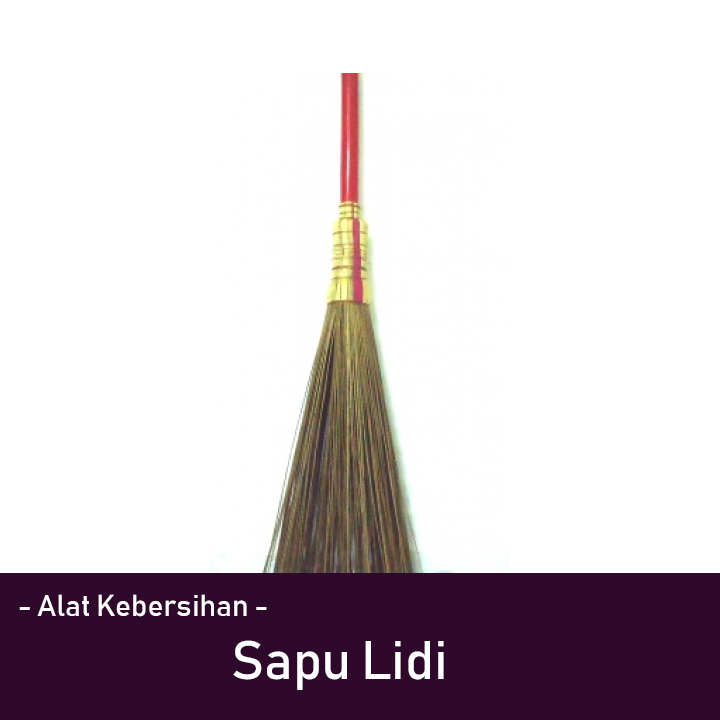
<style>
.page{position:relative;width:720px;height:720px;background:#ffffff}
.page>*{position:absolute;margin:0}
.t1{font:30px "Bahnschrift";color:#ffffff}
.t2{font:53.6px "Bahnschrift";color:#ffffff}
</style>
<div class="page">
<p class="t1" style="left:19px;top:594px;width:248px;height:23px">- Alat Kebersihan -</p>
<p class="t2" style="left:233px;top:640px;width:211px;height:50px">Sapu Lidi</p>
</div>
